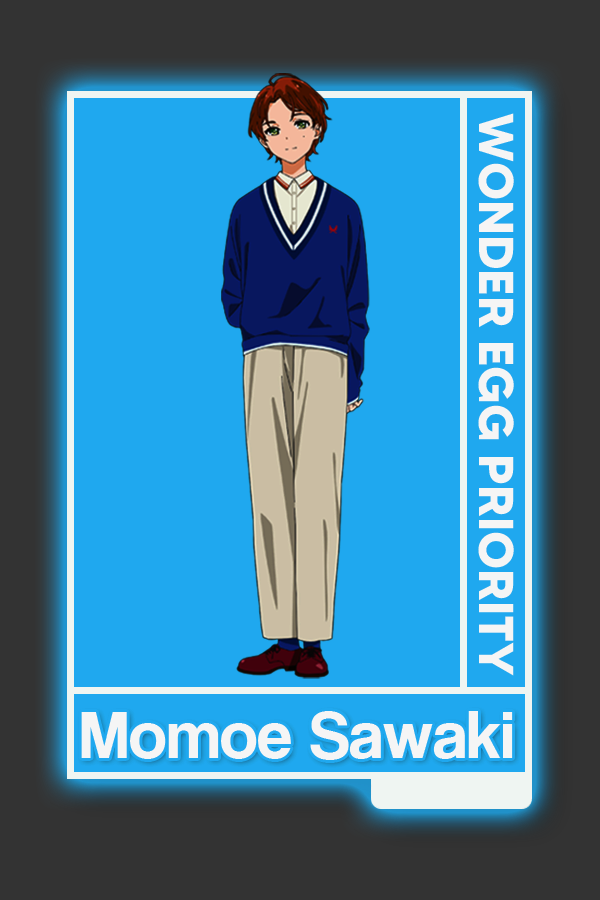
<style>
.page{position:relative;width:600px;height:900px;background:#1fa8ef}
.page>*{position:absolute;margin:0}
.t1{font:48.8px "MADETOMMY-Bold";color:#ffffff}
.t2{font:70.1px "CoolveticaRg-Regular";color:#ffffff}
</style>
<div class="page">
<p class="t1" style="left:478px;top:113px;width:36px;height:563px;rotate:90deg">WONDER EGG PRIORITY</p>
<p class="t2" style="left:81px;top:711px;width:432px;height:49px">Momoe Sawaki</p>
</div>
